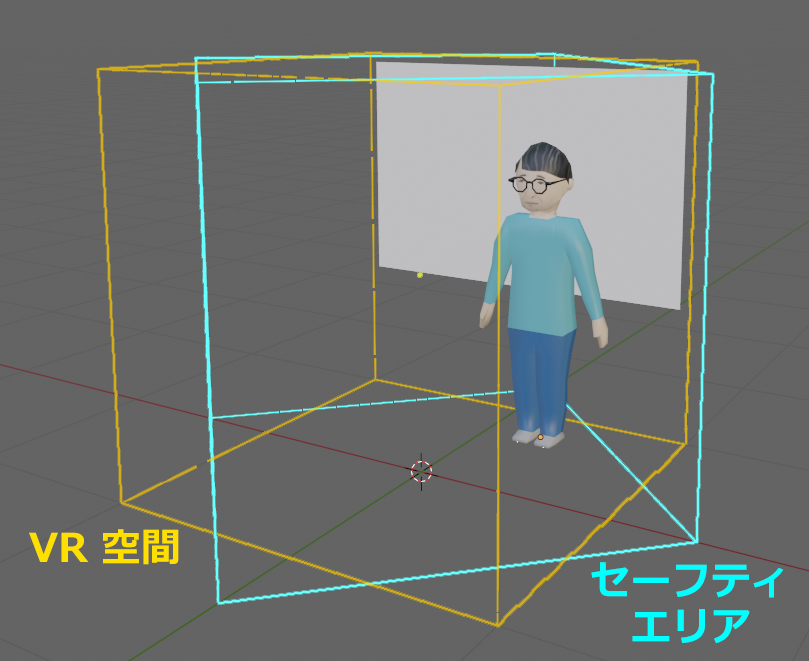
<style>
.page{position:relative;width:809px;height:661px;background:#646464}
.page>*{position:absolute;margin:0}
.t1{font:39.9px "Meiryo-Bold";color:#ffdf00}
.t2{font:39.9px/45.8px "Meiryo-Bold";color:#00ffff}
</style>
<div class="page">
<p class="t1" style="left:29px;top:529px;width:150px;height:36px">VR 空間</p>
<p class="t2" style="left:591px;top:562px;width:193px;height:82px;text-align:center">セーフティ<br>エリア</p>
</div>
